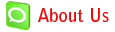
<style>
.page{position:relative;width:115px;height:32px;background:#ffffff}
.page>*{position:absolute;margin:0}
.t1{font:18px "BellGothicStd-Bold";color:#f90404}
</style>
<div class="page">
<p class="t1" style="left:38px;top:8px;width:71px;height:14px">About Us</p>
</div>
